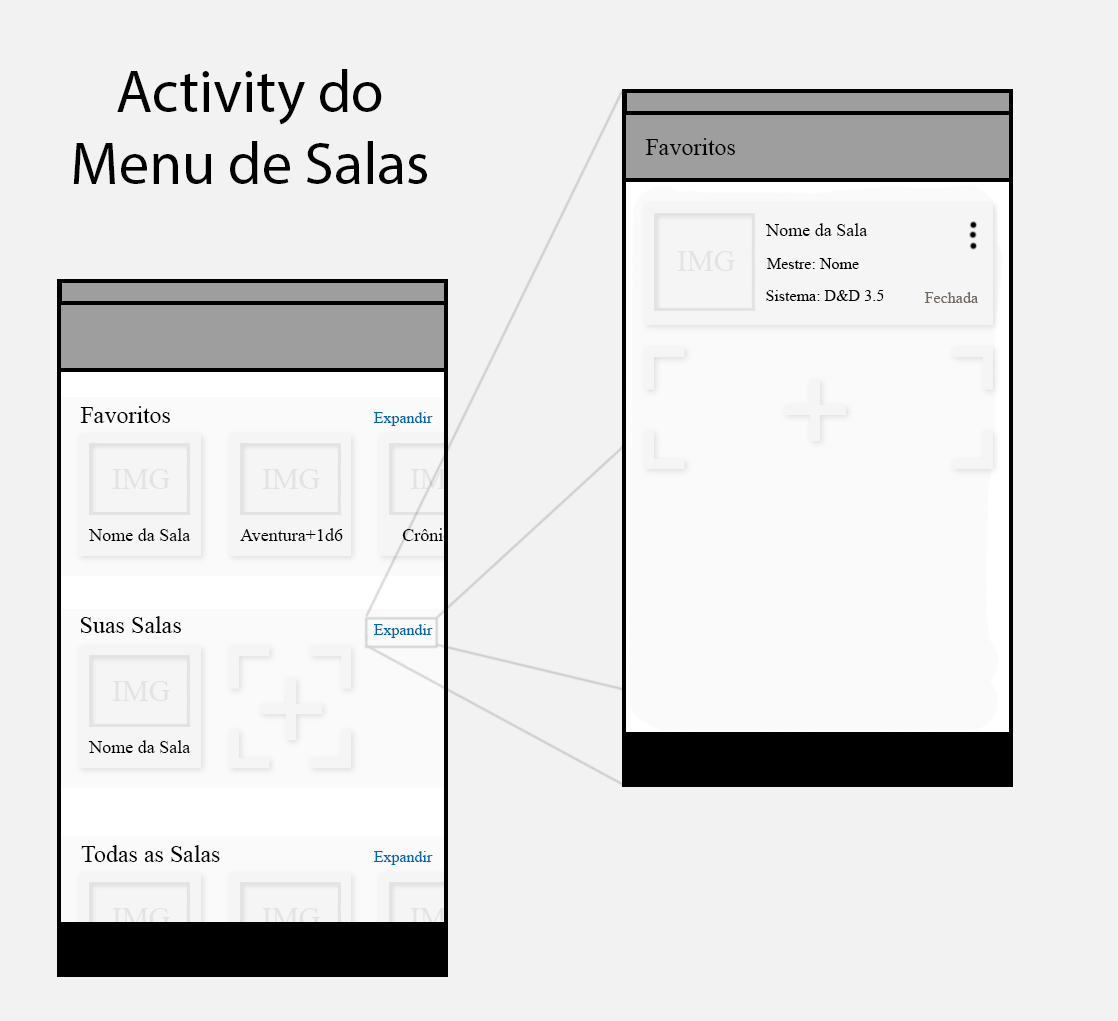
<style>
.page{position:relative;width:1118px;height:1021px;background:#f2f2f2}
.page>*{position:absolute;margin:0}
.t1{font:60px "MyriadPro-Regular";color:#000000}
.t2{font:24px "TimesNewRomanPSMT";color:#000000}
.t3{font:18px "TimesNewRomanPSMT";color:#000000}
.t4{font:30px "TimesNewRomanPSMT";color:#e3e3e3}
.t5{font:16px "TimesNewRomanPSMT";color:#000000}
.t6{font:16px "TimesNewRomanPSMT";color:#716a61}
.t7{font:16px "TimesNewRomanPSMT";color:#0066ad}
</style>
<div class="page">
<p class="t1" style="left:73px;top:69px;width:354px;height:115px;text-align:center">Activity do<br>Menu de Salas</p>
<p class="t2" style="left:645px;top:138px;width:90px;height:17px">Favoritos</p>
<p class="t3" style="left:765px;top:223px;width:103px;height:13px">Nome da Sala</p>
<p class="t4" style="left:677px;top:251px;width:58px;height:20px">IMG</p>
<p class="t5" style="left:767px;top:258px;width:92px;height:11px">Mestre: Nome</p>
<p class="t5" style="left:766px;top:290px;width:118px;height:11px">Sistema: D&amp;D 3.5</p>
<p class="t6" style="left:924px;top:292px;width:55px;height:11px">Fechada</p>
<p class="t2" style="left:80px;top:406px;width:90px;height:17px">Favoritos</p>
<p class="t2" style="left:80px;top:406px;width:90px;height:17px">Favoritos</p>
<p class="t7" style="left:374px;top:412px;width:59px;height:14px">Expandir</p>
<p class="t7" style="left:374px;top:412px;width:59px;height:14px">Expandir</p>
<p class="t4" style="left:112px;top:469px;width:58px;height:20px">IMG</p>
<p class="t4" style="left:112px;top:469px;width:58px;height:20px">IMG</p>
<p class="t4" style="left:262px;top:469px;width:58px;height:20px">IMG</p>
<p class="t4" style="left:262px;top:469px;width:58px;height:20px">IMG</p>
<p class="t3" style="left:88px;top:528px;width:103px;height:13px">Nome da Sala</p>
<p class="t3" style="left:88px;top:528px;width:103px;height:13px">Nome da Sala</p>
<p class="t3" style="left:240px;top:528px;width:103px;height:13px">Aventura+1d6</p>
<p class="t3" style="left:240px;top:528px;width:103px;height:13px">Aventura+1d6</p>
<p class="t3" style="left:402px;top:528px;width:64px;height:13px">Crônicas</p>
<p class="t3" style="left:402px;top:528px;width:64px;height:13px">Crônicas</p>
<p class="t2" style="left:80px;top:616px;width:101px;height:17px">Suas Salas</p>
<p class="t2" style="left:80px;top:616px;width:101px;height:17px">Suas Salas</p>
<p class="t7" style="left:374px;top:624px;width:59px;height:14px">Expandir</p>
<p class="t7" style="left:374px;top:624px;width:59px;height:14px">Expandir</p>
<p class="t4" style="left:112px;top:681px;width:58px;height:20px">IMG</p>
<p class="t4" style="left:112px;top:681px;width:58px;height:20px">IMG</p>
<p class="t3" style="left:88px;top:740px;width:103px;height:13px">Nome da Sala</p>
<p class="t3" style="left:88px;top:740px;width:103px;height:13px">Nome da Sala</p>
<p class="t2" style="left:81px;top:845px;width:139px;height:17px">Todas as Salas</p>
<p class="t2" style="left:81px;top:845px;width:139px;height:17px">Todas as Salas</p>
<p class="t7" style="left:374px;top:851px;width:59px;height:14px">Expandir</p>
<p class="t7" style="left:374px;top:851px;width:59px;height:14px">Expandir</p>
</div>
